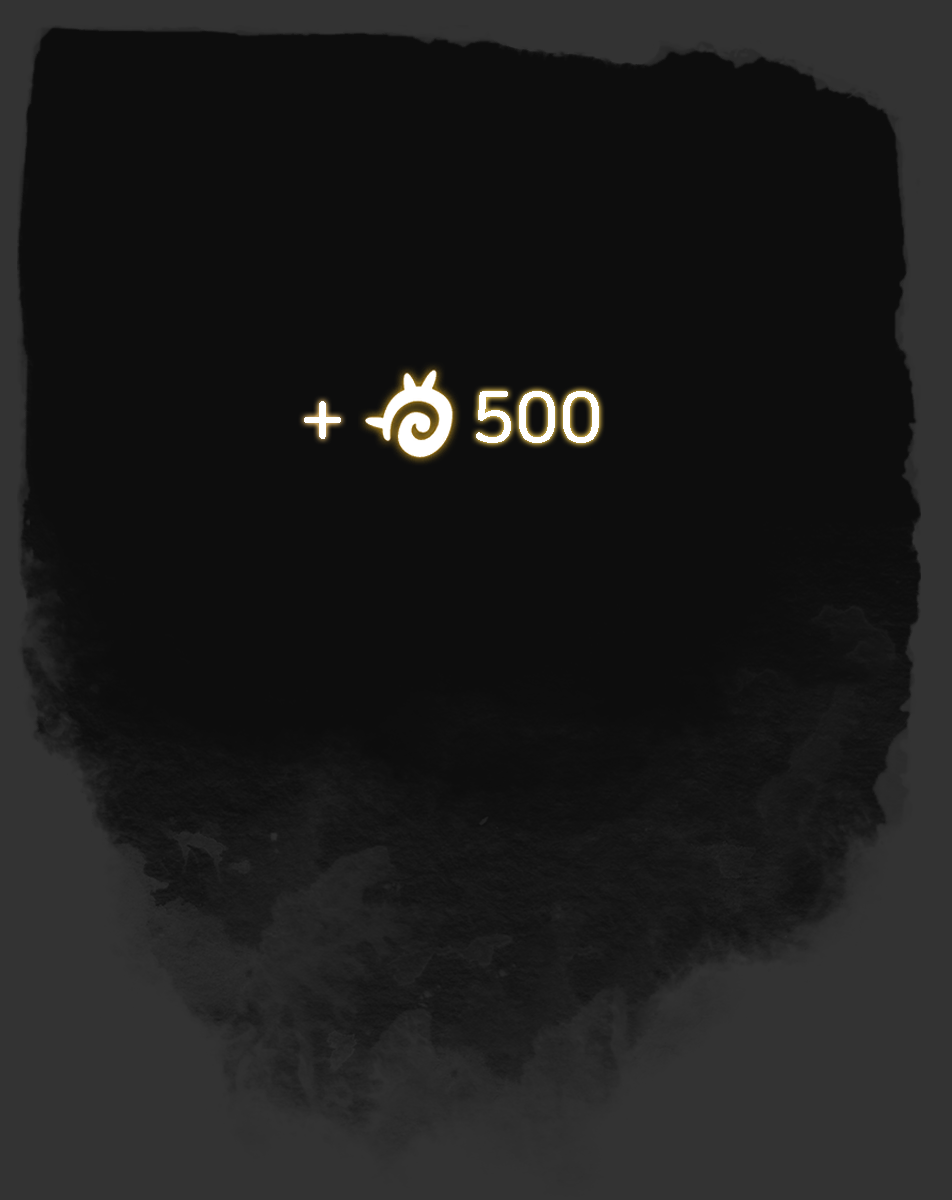
<style>
.page{position:relative;width:952px;height:1200px;background:#0d0d0d}
.page>*{position:absolute;margin:0}
.t1{font:72px "NanumSquareRoundB";color:#ffffff}
</style>
<div class="page">
<p class="t1" style="left:304px;top:401px;width:37px;height:38px">+</p>
<p class="t1" style="left:476px;top:391px;width:123px;height:52px">500</p>
</div>
